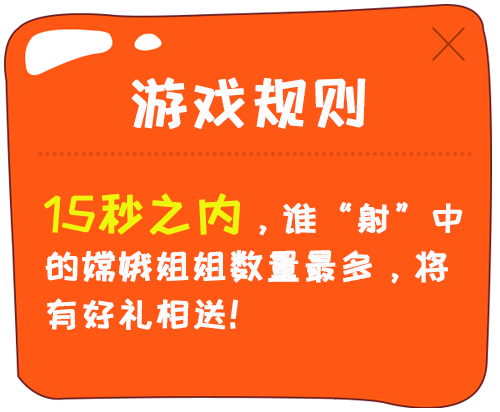
<style>
.page{position:relative;width:500px;height:412px;background:#ff5714}
.page>*{position:absolute;margin:0}
.t1{font:58.8px "HappyZcool-2016";color:#fcfcfc;font-weight:bold}
.t2{font:36px/48px "HappyZcool-2016";color:#fcfcfc;font-weight:bold}
.t3{font:48px/48px "HappyZcool-2016";color:#eef60d;font-weight:bold}
</style>
<div class="page">
<p class="t1" style="left:131px;top:77px;width:235px;height:52px">游戏规则</p>
<p class="t2" style="left:44px;top:193px;width:419px;height:137px"><span class="t3">15秒之内</span>，谁“射”中的嫦娥姐姐数量最多，将有好礼相送！</p>
</div>
